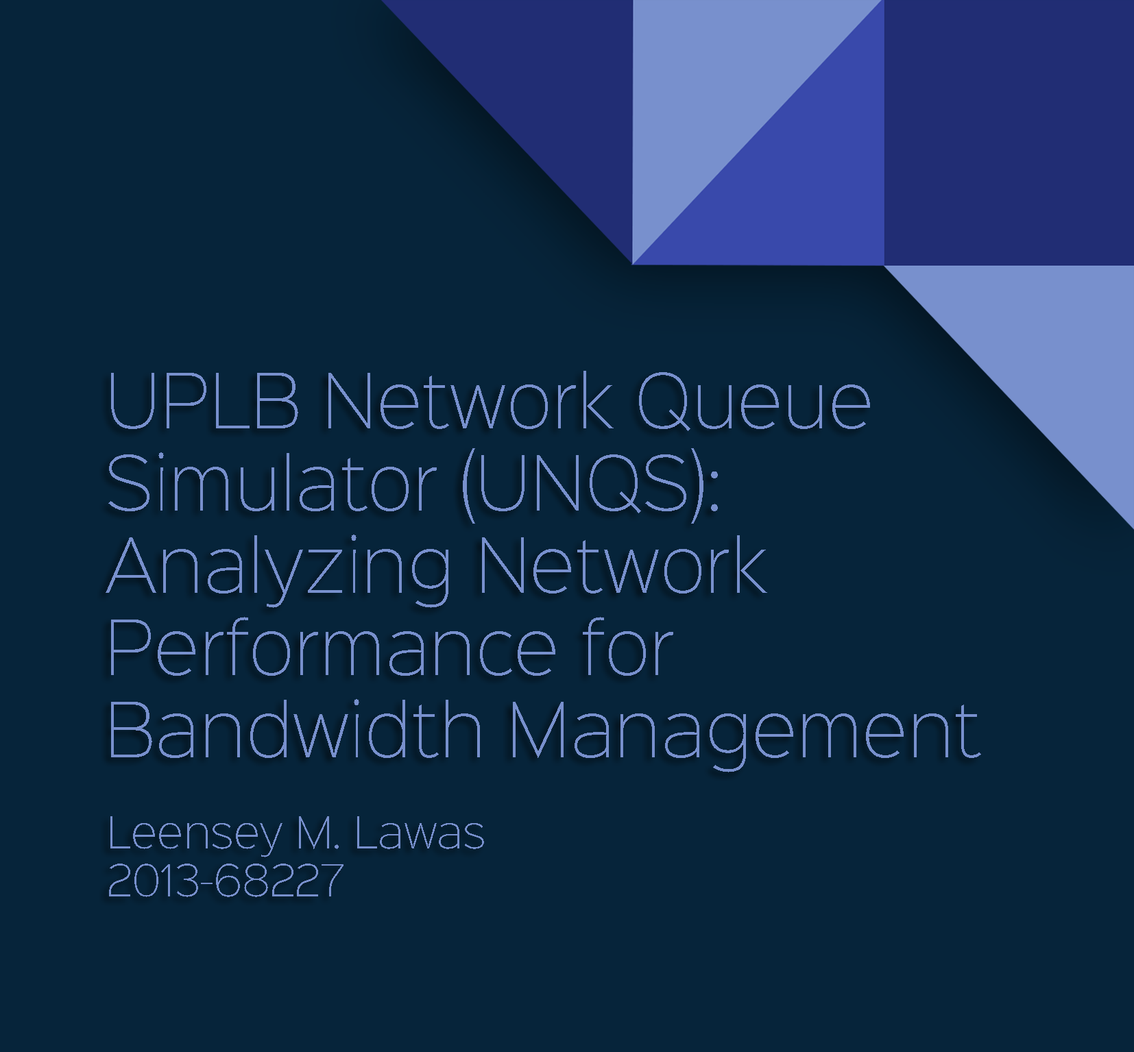
<style>
.page{position:relative;width:1134px;height:1052px;background:#06243a}
.page>*{position:absolute;margin:0}
.t1{font:68.5px "SinkinSans-200XLight";color:#7890cd}
.t2{font:40px "SinkinSans-200XLight";color:#7890cd}
</style>
<div class="page">
<p class="t1" style="left:106px;top:371px;width:875px;height:401px">UPLB Network Queue Simulator (UNQS): Analyzing Network Performance for Bandwidth Management</p>
<p class="t2" style="left:109px;top:816px;width:375px;height:81px">Leensey M. Lawas<br>2013-68227</p>
</div>
